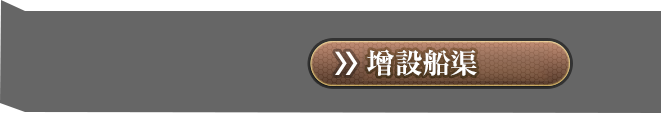
<style>
.page{position:relative;width:661px;height:113px;background:#666666}
.page>*{position:absolute;margin:0}
.t1{font:28px "RyuminPro-ExBold";color:#ffffff}
</style>
<div class="page">
<p class="t1" style="left:367px;top:49px;width:110px;height:27px">增設船渠</p>
</div>
